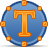
<style>
.page{position:relative;width:48px;height:48px;background:#ffffff}
.page>*{position:absolute;margin:0}
.t1{font:34px "MinionPro-Regular";color:#f78a14}
</style>
<div class="page">
<p class="t1" style="left:15px;top:11px;width:19px;height:24px">T</p>
</div>
